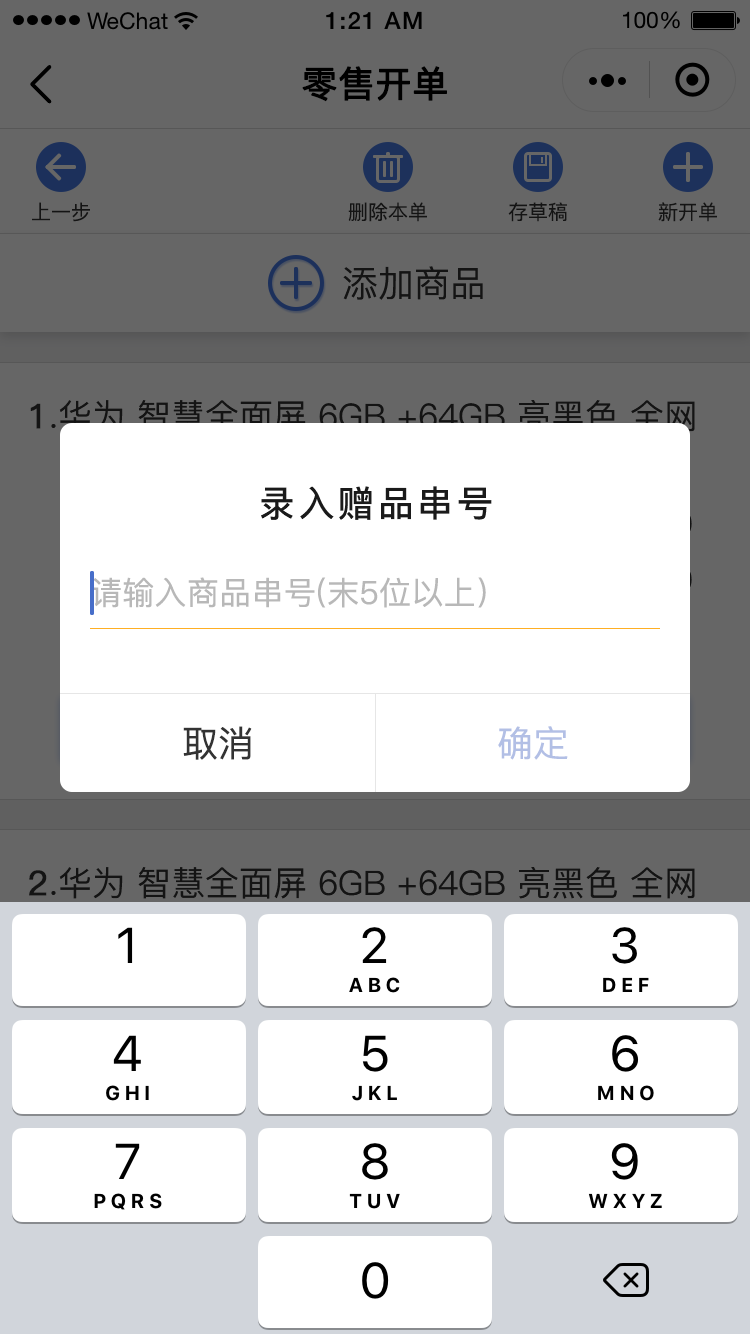
<style>
.page{position:relative;width:750px;height:1334px;background:#ffffff}
.page>*{position:absolute;margin:0}
.t1{font:36px "PingFang-SC-Medium";color:#000000;font-weight:bold}
.t2{font:20px "PingFang-SC-Medium";color:#141414}
.t3{font:36px "PingFang-SC-Medium";color:#141414}
.t4{font:36px "PingFang-SC-Bold";letter-spacing:0.1em;color:#1a1a1a}
.t5{font:32px "PingFang-SC-Medium";letter-spacing:0.01em;color:#b8b8b8}
.t6{font:36px "PingFang-SC-Medium";color:#333333}
.t7{font:36px "PingFang-SC-Medium";color:#b2bfe5}
</style>
<div class="page">
<p class="t1" style="left:302px;top:66px;width:145px;height:36px">零售开单</p>
<p class="t2" style="left:32px;top:202px;width:58px;height:20px">上一步</p>
<p class="t2" style="left:348px;top:202px;width:79px;height:20px">删除本单</p>
<p class="t2" style="left:508px;top:202px;width:59px;height:20px">存草稿</p>
<p class="t2" style="left:658px;top:202px;width:59px;height:20px">新开单</p>
<p class="t3" style="left:343px;top:266px;width:140px;height:34px">添加商品</p>
<p class="t4" style="left:261px;top:486px;width:231px;height:34px">录入赠品串号</p>
<p class="t5" style="left:91px;top:577px;width:395px;height:31px">请输入商品串号(末5位以上）</p>
<p class="t6" style="left:183px;top:726px;width:69px;height:34px">取消</p>
<p class="t7" style="left:498px;top:726px;width:70px;height:34px">确定</p>
</div>
